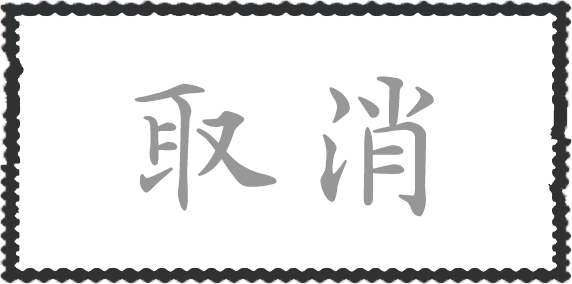
<style>
.page{position:relative;width:572px;height:284px;background:#ffffff}
.page>*{position:absolute;margin:0}
.t1{font:180px "DFWZMingStd-W4";color:#979797}
</style>
<div class="page">
<p class="t1" style="left:134px;top:76px;width:300px;height:141px">取消</p>
</div>
